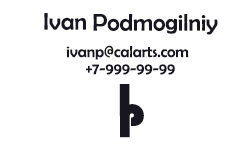
<style>
.page{position:relative;width:252px;height:144px;background:#ffffff}
.page>*{position:absolute;margin:0}
.t1{font:24px "BerlinSansFB-Reg";color:#181621}
.t2{font:16px "BerlinSansFB-Reg";color:#181621}
.t3{font:48px "Bauhaus93";letter-spacing:0.02em;color:#181621}
</style>
<div class="page">
<p class="t1" style="left:44px;top:13px;width:42px;height:17px">Ivan</p>
<p class="t1" style="left:93px;top:13px;width:125px;height:22px">Podmogilniy</p>
<p class="t2" style="left:66px;top:45px;width:123px;height:15px">ivanp@calarts.com</p>
<p class="t2" style="left:86px;top:64px;width:89px;height:11px">+7-999-99-99</p>
<p class="t3" style="left:119px;top:84px;width:11px;height:33px">I</p>
<p class="t3" style="left:120px;top:104px;width:24px;height:34px">P</p>
</div>
